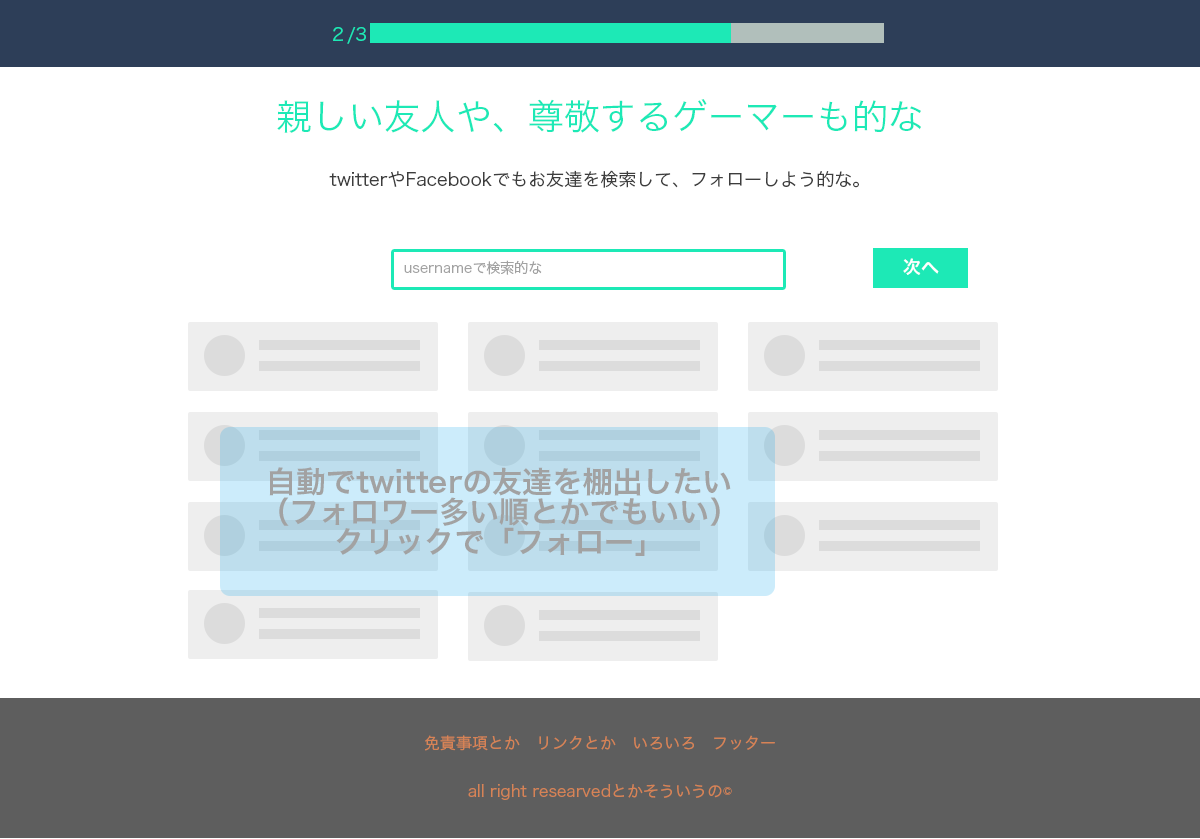
<style>
.page{position:relative;width:1200px;height:839px;background:#ffffff}
.page>*{position:absolute;margin:0}
.t1{font:18px "HiraKakuPro-W3";color:#1de9b6}
.t2{font:36px "HiraKakuPro-W3";color:#1de9b6}
.t3{font:18px "HiraKakuPro-W3";color:#3d3d3d}
.t4{font:14px "HiraKakuPro-W3";color:#a2a2a2}
.t5{font:18px "HiraKakuPro-W6";color:#ffffff}
.t6{font:30px/30px "HiraKakuPro-W6";color:#a2a2a2}
.t7{font:16px/48px "HiraKakuPro-W3";color:#d68356}
</style>
<div class="page">
<p class="t1" style="left:333px;top:27px;width:33px;height:17px">２/3</p>
<p class="t2" style="left:277px;top:99px;width:644px;height:34px">親しい友人や、尊敬するゲーマーも的な</p>
<p class="t3" style="left:329px;top:170px;width:530px;height:18px">twitterやFacebookでもお友達を検索して、フォローしよう的な。</p>
<p class="t4" style="left:404px;top:260px;width:138px;height:15px">usernameで検索的な</p>
<p class="t5" style="left:903px;top:258px;width:36px;height:17px">次へ</p>
<p class="t6" style="left:269px;top:467px;width:462px;height:89px;text-align:center">自動でtwitterの友達を棚出したい<br>（フォロワー多い順とかでもいい）<br>クリックで「フォロー」</p>
<p class="t7" style="left:425px;top:735px;width:350px;height:65px;text-align:center">免責事項とか　リンクとか　いろいろ　フッター<br>all right researvedとかそういうの©</p>
</div>
